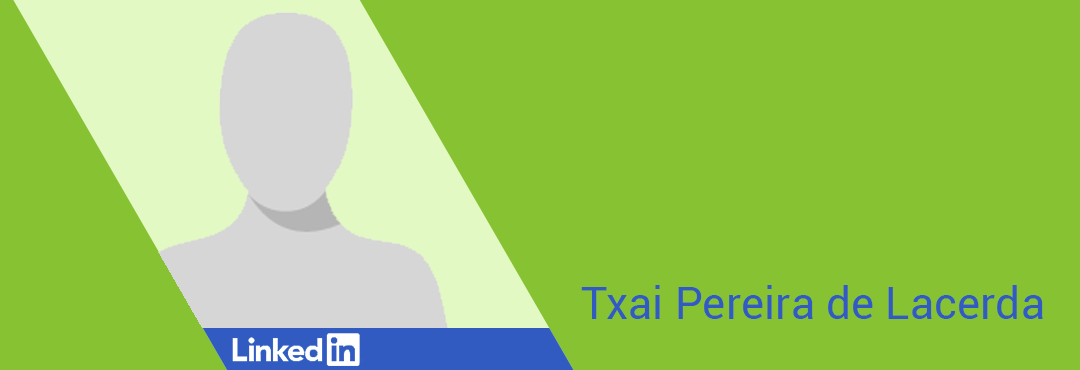
<style>
.page{position:relative;width:1080px;height:370px;background:#87c232}
.page>*{position:absolute;margin:0}
.t1{font:44.4px "Roboto-Regular";color:#325bc2}
</style>
<div class="page">
<p class="t1" style="left:581px;top:285px;width:462px;height:34px">Txai Pereira de Lacerda</p>
</div>
